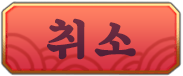
<style>
.page{position:relative;width:183px;height:76px}
.page>*{position:absolute;margin:0}
.t1{font:46.1px "SDKukdetopokki-bBd";letter-spacing:0.12em;color:#5d263c}
</style>
<div class="page">
<p class="t1" style="left:47px;top:18px;width:89px;height:42px">취소</p>
</div>
